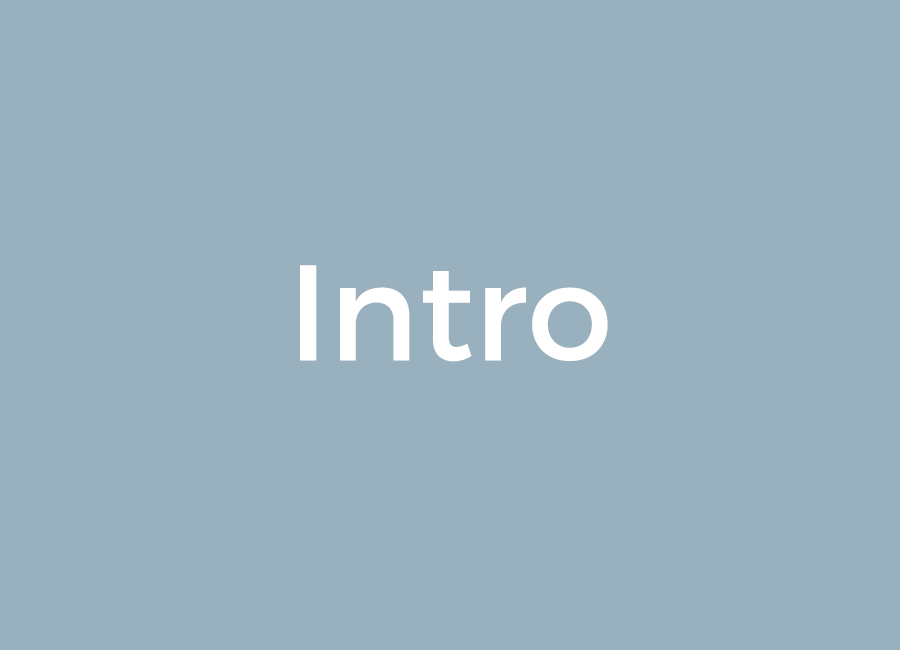
<style>
.page{position:relative;width:900px;height:650px;background:#99b1be}
.page>*{position:absolute;margin:0}
.t1{font:135.8px "Montserrat-Regular";color:#ffffff}
</style>
<div class="page">
<p class="t1" style="left:300px;top:265px;width:308px;height:97px">Intro</p>
</div>
